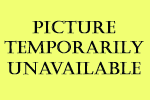
<style>
.page{position:relative;width:150px;height:100px;background:#f1ff72}
.page>*{position:absolute;margin:0}
.t1{font:17px "Castellar";color:#060808;font-weight:bold}
</style>
<div class="page">
<p class="t1" style="left:4px;top:20px;width:140px;height:55px;text-align:center">Picture<br>TEmporarily<br>Unavailable</p>
</div>
